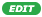
<style>
.page{position:relative;width:42px;height:17px;background:#2ca949}
.page>*{position:absolute;margin:0}
.t1{font:9px "Verdana-BoldItalic";color:#ffffff}
</style>
<div class="page">
<p class="t1" style="left:9px;top:5px;width:26px;height:7px">EDIT</p>
</div>
